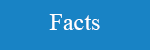
<style>
.page{position:relative;width:150px;height:50px;background:#1883c5}
.page>*{position:absolute;margin:0}
.t1{font:24px "TimesNewRomanPSMT";color:#ffffff}
</style>
<div class="page">
<p class="t1" style="left:49px;top:14px;width:51px;height:16px">Facts</p>
</div>
